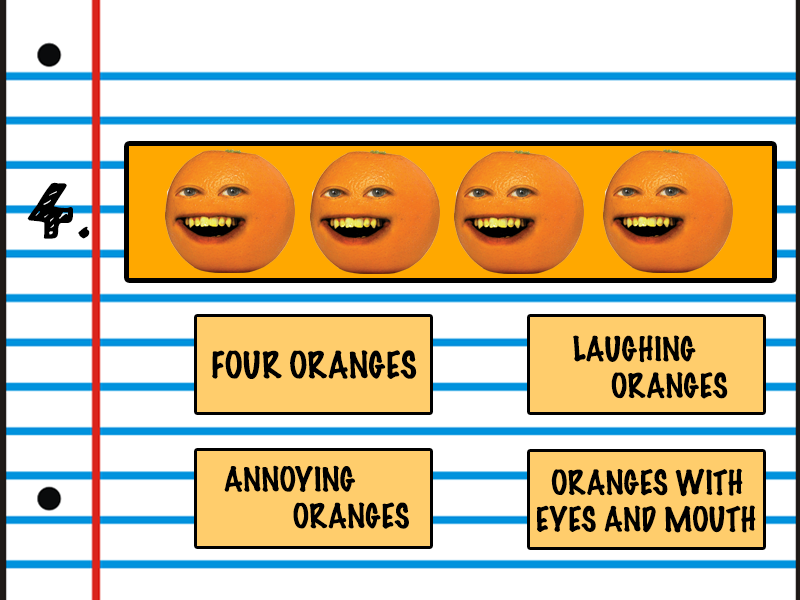
<style>
.page{position:relative;width:800px;height:600px;background:#ffffff}
.page>*{position:absolute;margin:0}
.t1{font:66.7px "Golden-Star";color:#000000}
.t2{font:30.6px "MarkerFelt-Thin";color:#000000}
.t3{font:33.3px "MarkerFelt-Thin";color:#000000}
</style>
<div class="page">
<p class="t1" style="left:27px;top:182px;width:63px;height:57px">4.</p>
<p class="t2" style="left:573px;top:335px;width:155px;height:64px">LAUGHING <br>     ORANGES</p>
<p class="t3" style="left:212px;top:350px;width:205px;height:29px">FOUR ORANGES</p>
<p class="t2" style="left:224px;top:465px;width:185px;height:64px">ANNOYING <br>         ORANGES</p>
<p class="t2" style="left:537px;top:468px;width:219px;height:65px">ORANGES WITH<br>EYES AND MOUTH</p>
</div>
